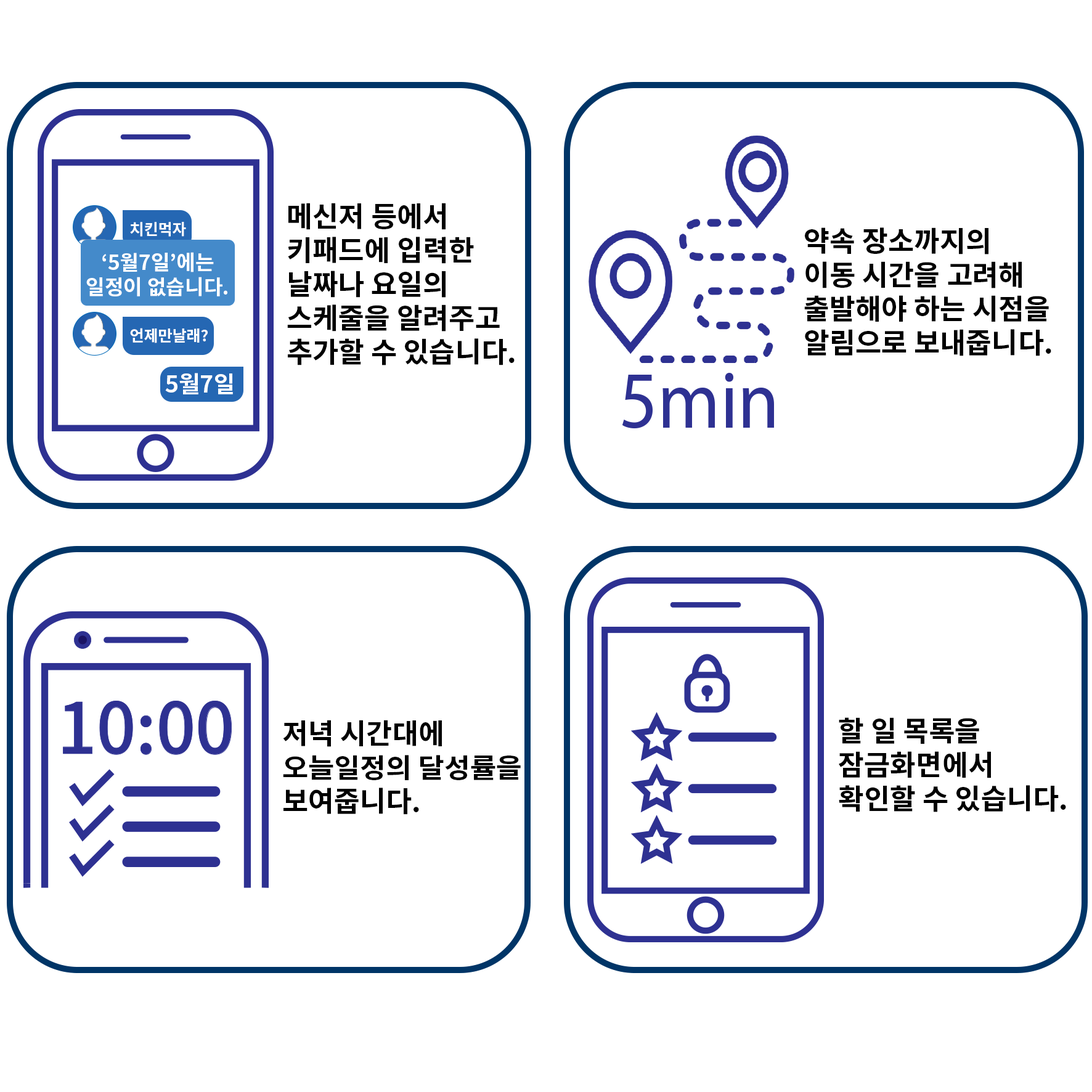
<style>
.page{position:relative;width:1092px;height:1092px;background:#ffffff}
.page>*{position:absolute;margin:0}
.t1{font:28.2px "NotoSansCJKkr-Bold";color:#000000}
.t2{font:15.4px "NotoSansCJKkr-Bold";color:#ffffff}
.t3{font:20.5px "NotoSansCJKkr-Bold";color:#ffffff}
.t4{font:23.1px "NotoSansCJKkr-Bold";color:#ffffff}
.t5{font:26.8px "NotoSansCJKkr-Bold";color:#000000;scale:1.05 1}
</style>
<div class="page">
<p class="t1" style="left:287px;top:203px;width:228px;height:162px">메신저 등에서<br>키패드에 입력한<br>날짜나 요일의 <br>스케줄을 알려주고<br>추가할 수 있습니다.</p>
<p class="t2" style="left:130px;top:222px;width:56px;height:15px">치킨먹자</p>
<p class="t1" style="left:804px;top:227px;width:247px;height:129px">약속 장소까지의 <br>이동 시간을 고려해 <br>출발해야 하는 시점을 <br>알림으로 보내줍니다.</p>
<p class="t3" style="left:86px;top:252px;width:141px;height:44px;text-align:center">‘5월7일’에는<br>일정이 없습니다.</p>
<p class="t2" style="left:130px;top:328px;width:78px;height:15px">언제만날래?</p>
<p class="t4" style="left:165px;top:373px;width:68px;height:21px">5월7일</p>
<p class="t5" style="left:283px;top:720px;width:238px;height:95px"><span class="t1">저녁 시간대에 <br></span>오늘일정의 달성률을<br><span class="t1">보여줍니다.</span></p>
<p class="t1" style="left:839px;top:717px;width:227px;height:95px">할 일 목록을<br>잠금화면에서<br>확인할 수 있습니다.</p>
</div>
